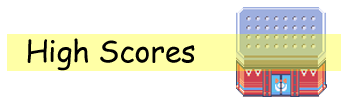
<style>
.page{position:relative;width:350px;height:100px;background:#ffffff}
.page>*{position:absolute;margin:0}
.t1{font:29.9px "ComicSansMS";color:#000000}
</style>
<div class="page">
<p class="t1" style="left:27px;top:38px;width:168px;height:33px">High Scores</p>
</div>
